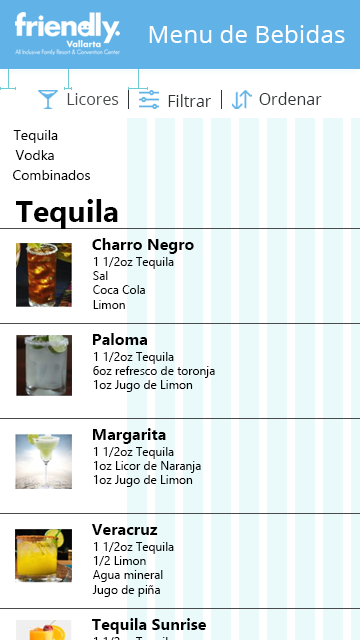
<style>
.page{position:relative;width:360px;height:640px;background:#ffffff}
.page>*{position:absolute;margin:0}
.t1{font:24.4px "OpenSans";color:#ffffff}
.t2{font:16px "OpenSans";color:#484a4c}
.t3{font:16px "OpenSans";color:#313436}
.t4{font:14px "Gadugi";color:#000000}
.t5{font:30px "Gadugi-Bold";color:#000000}
.t6{font:16px "Gadugi-Bold";color:#000000}
.t7{font:12px "Gadugi";color:#000000}
</style>
<div class="page">
<p class="t1" style="left:149px;top:25px;width:196px;height:18px">Menu de Bebidas</p>
<p class="t2" style="left:67px;top:93px;width:52px;height:12px">Licores</p>
<p class="t3" style="left:168px;top:94px;width:43px;height:13px">Filtrar</p>
<p class="t3" style="left:259px;top:92px;width:63px;height:13px">Ordenar</p>
<p class="t4" style="left:13px;top:130px;width:45px;height:13px">Tequila</p>
<p class="t4" style="left:15px;top:150px;width:39px;height:10px">Vodka</p>
<p class="t4" style="left:13px;top:170px;width:77px;height:10px">Combinados</p>
<p class="t5" style="left:16px;top:199px;width:102px;height:30px">Tequila</p>
<p class="t6" style="left:92px;top:238px;width:102px;height:16px">Charro Negro</p>
<p class="t7" style="left:93px;top:257px;width:81px;height:52px">1 1/2oz Tequila<br>Sal<br>Coca Cola<br>Limon</p>
<p class="t6" style="left:93px;top:333px;width:54px;height:12px">Paloma</p>
<p class="t7" style="left:93px;top:352px;width:122px;height:40px">1 1/2oz Tequila<br>6oz refresco de toronja<br>1oz Jugo de Limon</p>
<p class="t6" style="left:93px;top:428px;width:73px;height:16px">Margarita</p>
<p class="t7" style="left:94px;top:447px;width:107px;height:40px">1 1/2oz Tequila<br>1oz Licor de Naranja<br>1oz Jugo de Limon</p>
<p class="t6" style="left:91px;top:524px;width:67px;height:11px">Veracruz</p>
<p class="t7" style="left:92px;top:542px;width:82px;height:55px">1 1/2oz Tequila<br>1/2 Limon<br>Agua mineral<br>Jugo de piña</p>
<p class="t6" style="left:92px;top:618px;width:114px;height:16px">Tequila Sunrise</p>
</div>
